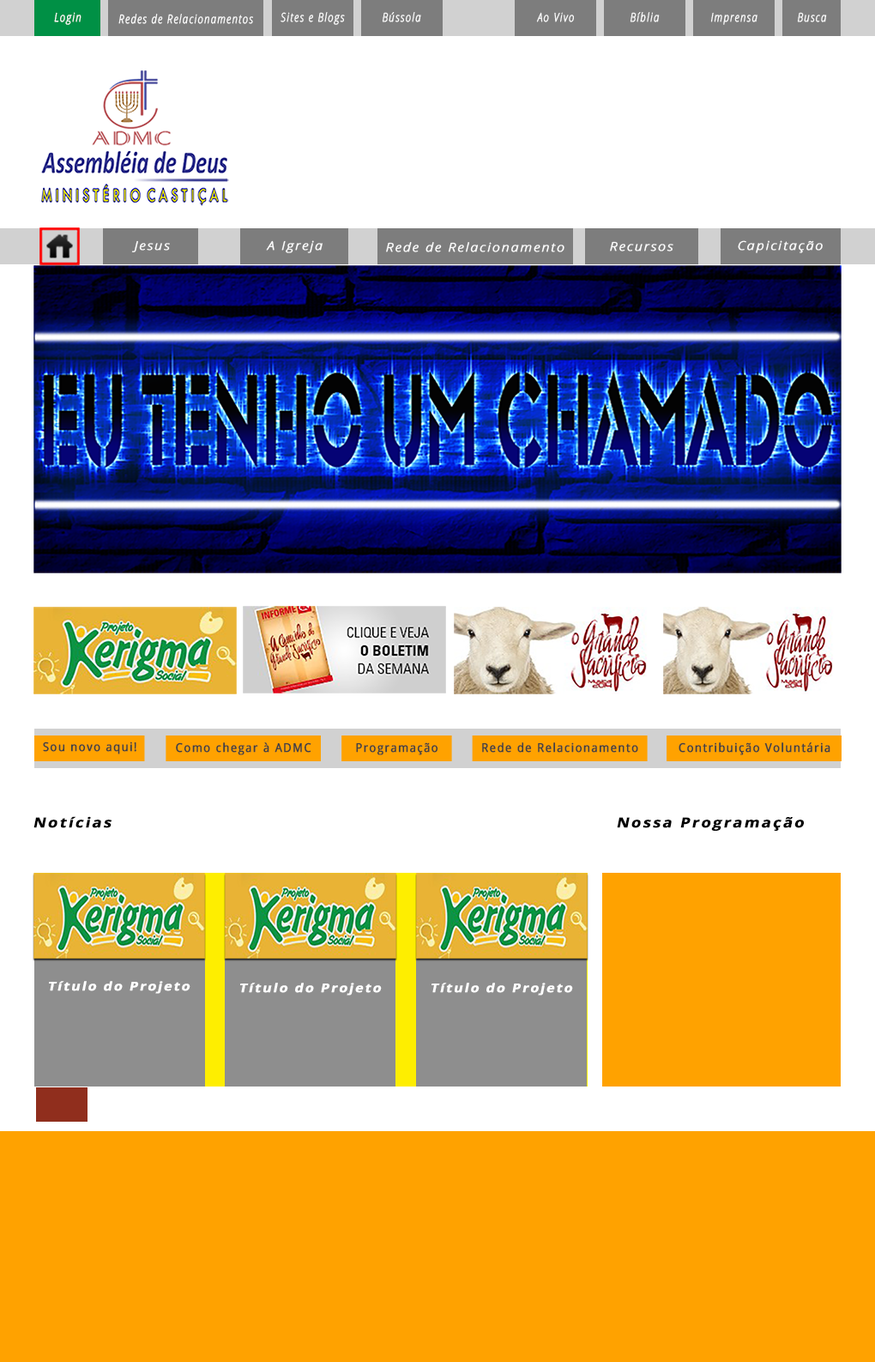
<style>
.page{position:relative;width:875px;height:1362px;background:#ffffff}
.page>*{position:absolute;margin:0}
.t1{font:12px "OpenSansLight-Italic";letter-spacing:0.105em;color:#ffffff;font-weight:bold;scale:0.79 1}
.t2{font:12px "OpenSansLight-Italic";letter-spacing:0.105em;color:#ffffff;font-weight:bold;scale:1.13 1}
.t3{font:12px "OpenSans";letter-spacing:0.105em;color:#424141;font-weight:bold;scale:0.91 1}
.t4{font:13.7px "OpenSans-Bold";letter-spacing:0.105em;color:#000000;font-weight:bold;font-style:italic;scale:1.13 1}
.t5{font:12px "OpenSans-Bold";letter-spacing:0.105em;color:#ffffff;font-weight:bold;font-style:italic;scale:1.13 1}
</style>
<div class="page">
<p class="t1" style="left:54px;top:12px;width:28px;height:13px">Login</p>
<p class="t1" style="left:118px;top:14px;width:135px;height:10px">Redes de Relacionamentos</p>
<p class="t1" style="left:281px;top:12px;width:64px;height:13px">Sites e Blogs</p>
<p class="t1" style="left:382px;top:12px;width:39px;height:10px">Bússola</p>
<p class="t1" style="left:536px;top:12px;width:38px;height:10px">Ao Vivo</p>
<p class="t1" style="left:630px;top:12px;width:30px;height:10px">Bíblia</p>
<p class="t1" style="left:711px;top:12px;width:47px;height:13px">Imprensa</p>
<p class="t1" style="left:797px;top:12px;width:30px;height:10px">Busca</p>
<p class="t2" style="left:131px;top:240px;width:39px;height:12px">Jesus</p>
<p class="t2" style="left:266px;top:240px;width:57px;height:13px">A Igreja</p>
<p class="t2" style="left:386px;top:242px;width:179px;height:10px">Rede de Relacionamento</p>
<p class="t2" style="left:610px;top:241px;width:64px;height:10px">Recursos</p>
<p class="t2" style="left:738px;top:240px;width:85px;height:13px">Capicitação</p>
<p class="t3" style="left:43px;top:742px;width:93px;height:12px">Sou novo aqui!</p>
<p class="t3" style="left:176px;top:742px;width:136px;height:13px">Como chegar à ADMC</p>
<p class="t3" style="left:356px;top:742px;width:83px;height:13px">Programação</p>
<p class="t3" style="left:482px;top:742px;width:157px;height:11px">Rede de Relacionamento</p>
<p class="t3" style="left:679px;top:742px;width:152px;height:13px">Contribuição Voluntária</p>
<p class="t4" style="left:33px;top:816px;width:79px;height:12px">Notícias</p>
<p class="t4" style="left:617px;top:817px;width:187px;height:14px">Nossa Programação</p>
<p class="t5" style="left:49px;top:981px;width:142px;height:13px">Título do Projeto</p>
<p class="t5" style="left:240px;top:983px;width:142px;height:13px">Título do Projeto</p>
<p class="t5" style="left:432px;top:983px;width:141px;height:13px">Título do Projeto</p>
</div>
